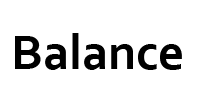
<style>
.page{position:relative;width:197px;height:100px;background:#ffffff}
.page>*{position:absolute;margin:0}
.t1{font:50.8px "Corbel-Bold";color:#000000}
</style>
<div class="page">
<p class="t1" style="left:15px;top:33px;width:167px;height:37px">Balance</p>
</div>
